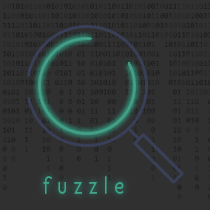
<style>
.page{position:relative;width:210px;height:210px;background:#303030}
.page>*{position:absolute;margin:0}
.t1{font:29.1px "KalosSans-Book";letter-spacing:0.26em;color:#3fa68c;scale:0.86 1}
</style>
<div class="page">
<p class="t1" style="left:43px;top:176px;width:81px;height:18px">fuzzle</p>
</div>
